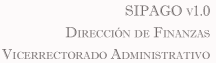
<style>
.page{position:relative;width:216px;height:63px;background:#fdfafa}
.page>*{position:absolute;margin:0}
.t1{font:14.5px "ImprintMT-Shadow";color:#706a6a;font-variant:small-caps}
</style>
<div class="page">
<p class="t1" style="left:2px;top:5px;width:208px;height:55px;text-align:right">SIPAGO v1.0<br>Dirección de Finanzas<br>Vicerrectorado Administrativo</p>
</div>
